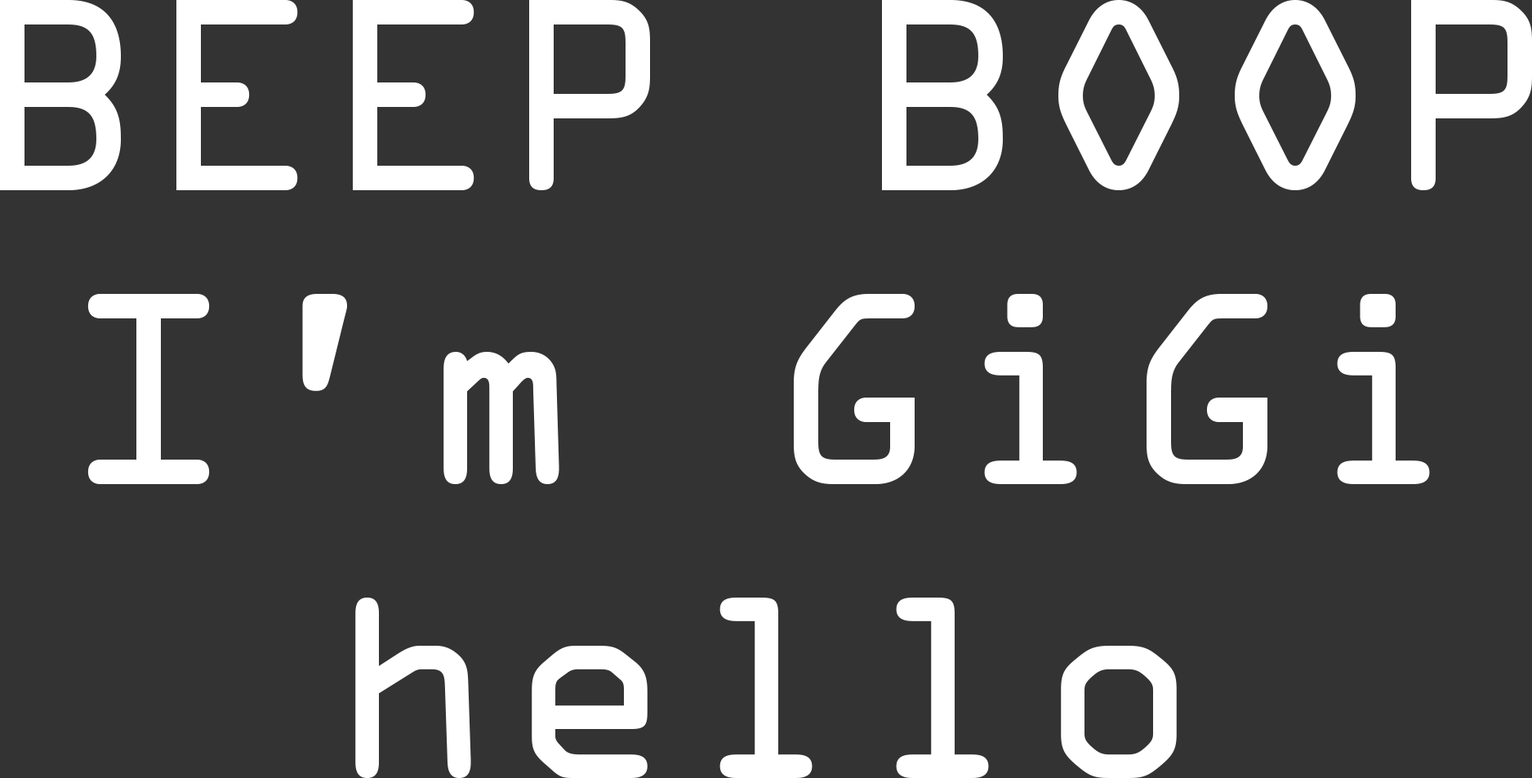
<style>
.page{position:relative;width:1532px;height:778px;background:#333333}
.page>*{position:absolute;margin:0}
.t1{font:245px "OCRAStd";color:#ffffff}
</style>
<div class="page">
<p class="t1" style="left:0px;top:0px;width:1532px;height:778px;text-align:center">BEEP BOOP<br>I’m GiGi<br>hello</p>
</div>
